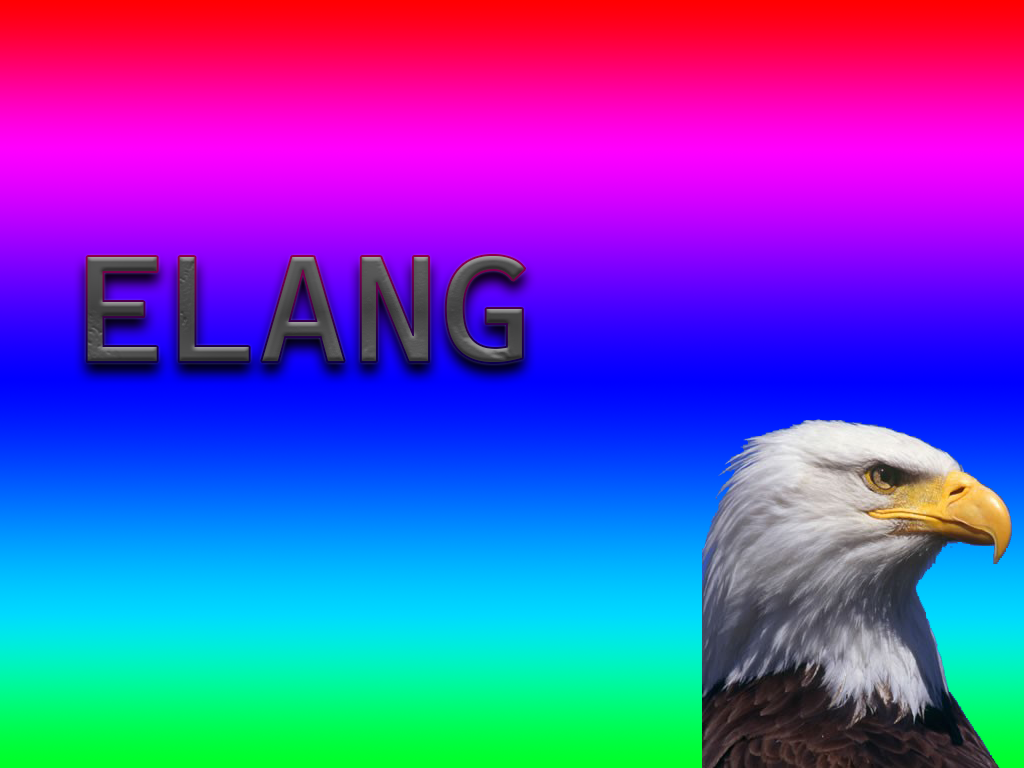
<style>
.page{position:relative;width:1024px;height:768px}
.page>*{position:absolute;margin:0}
.t1{font:150px "CascadiaMono-Roman";letter-spacing:0.025em;color:#4d4d4d}
</style>
<div class="page">
<p class="t1" style="left:87px;top:256px;width:438px;height:106px">ELANG</p>
</div>
